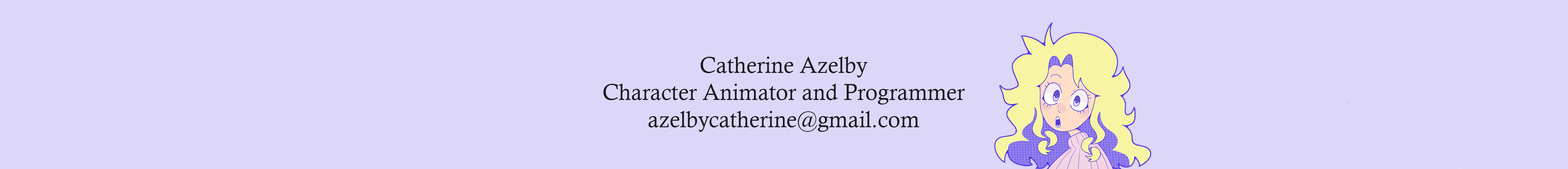
<style>
.page{position:relative;width:1568px;height:169px;background:#dcd7f8}
.page>*{position:absolute;margin:0}
.t1{font:22.6px "CalistoMT";color:#1c191f}
</style>
<div class="page">
<p class="t1" style="left:603px;top:56px;width:362px;height:76px;text-align:center">Catherine Azelby<br>Character Animator and Programmer<br>azelbycatherine@gmail.com</p>
</div>
